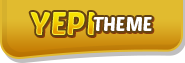
<style>
.page{position:relative;width:185px;height:63px;background:#e1bb2f}
.page>*{position:absolute;margin:0}
.t1{font:32px "PoetsenOne-Regular";text-transform:uppercase}
.t2{font:18.5px "PoetsenOne-Regular";color:#ffffff;text-transform:uppercase}
</style>
<div class="page">
<p class="t1" style="left:30px;top:12px;width:65px;height:23px">yepi</p>
<p class="t2" style="left:93px;top:17px;width:59px;height:14px">Theme</p>
</div>
